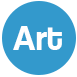
<style>
.page{position:relative;width:77px;height:77px;background:#3399cc}
.page>*{position:absolute;margin:0}
.t1{font:35.4px "CoolveticaRg-Regular";color:#ffffff}
</style>
<div class="page">
<p class="t1" style="left:13px;top:26px;width:49px;height:24px">Art</p>
</div>
